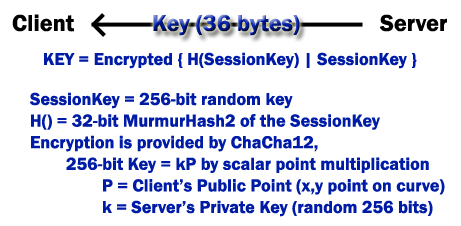
<style>
.page{position:relative;width:461px;height:226px;background:#ffffff}
.page>*{position:absolute;margin:0}
.t1{font:24px "FranklinGothic-Demi";color:#000000}
.t2{font:24px "FranklinGothic-Demi"}
.t3{font:18px "FranklinGothic-Demi";color:#001ca7}
</style>
<div class="page">
<p class="t1" style="left:12px;top:14px;width:62px;height:18px">Client</p>
<p class="t2" style="left:153px;top:14px;width:147px;height:22px">Key (36 bytes)</p>
<p class="t1" style="left:380px;top:14px;width:67px;height:18px">Server</p>
<p class="t3" style="left:44px;top:52px;width:373px;height:17px">KEY = Encrypted { H(SessionKey) | SessionKey }</p>
<p class="t3" style="left:30px;top:92px;width:415px;height:125px">SessionKey = 256-bit random key<br>H() = 32-bit MurmurHash2 of the SessionKey<br>Encryption is provided by ChaCha12,<br> 256-bit Key = kP by scalar point multiplication<br>  P = Client’s Public Point (x,y point on curve)<br>  k = Server’s Private Key (random 256 bits)</p>
</div>
